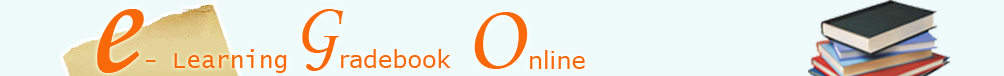
<style>
.page{position:relative;width:1004px;height:76px;background:#effbfb}
.page>*{position:absolute;margin:0}
.t1{font:152px "MonotypeCorsiva";color:#f9690a}
.t2{font:73.9px "MonotypeCorsiva";color:#f9690a}
.t3{font:95.3px "MonotypeCorsiva";color:#f9690a}
.t4{font:24px "LucidaConsole";color:#f9690a}
.t5{font:105px "MonotypeCorsiva";color:#f9690a}
.t6{font:24px "Verdana";color:#f9690a}
</style>
<div class="page">
<p class="t1" style="left:97px;top:9px;width:47px;height:64px">e</p>
<p class="t2" style="left:302px;top:9px;width:41px;height:62px">G</p>
<p class="t3" style="left:474px;top:12px;width:54px;height:57px">O</p>
<p class="t4" style="left:146px;top:49px;width:141px;height:24px"><span class="t5"> </span>- Learning</p>
<p class="t6" style="left:341px;top:49px;width:110px;height:19px">radebook</p>
<p class="t6" style="left:530px;top:50px;width:55px;height:19px">nline</p>
</div>
